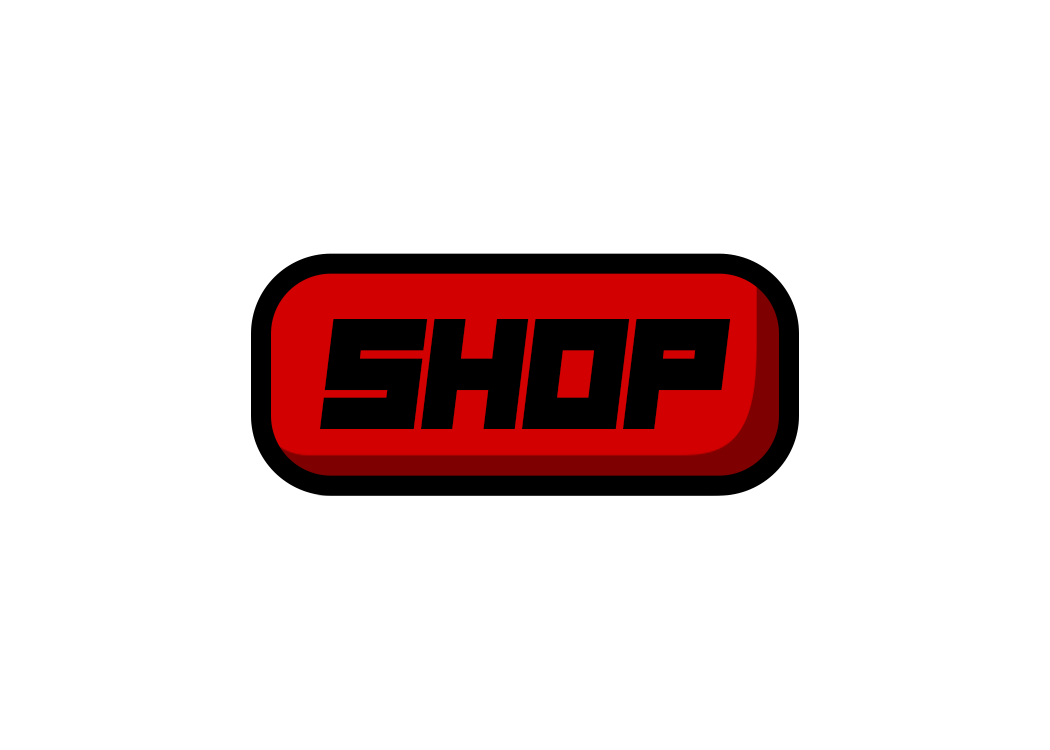
<style>
.page{position:relative;width:1050px;height:750px;background:#ffffff}
.page>*{position:absolute;margin:0}
.t1{font:159.6px "NauSea";color:#000000}
</style>
<div class="page">
<p class="t1" style="left:320px;top:319px;width:411px;height:110px">SHoP</p>
</div>
